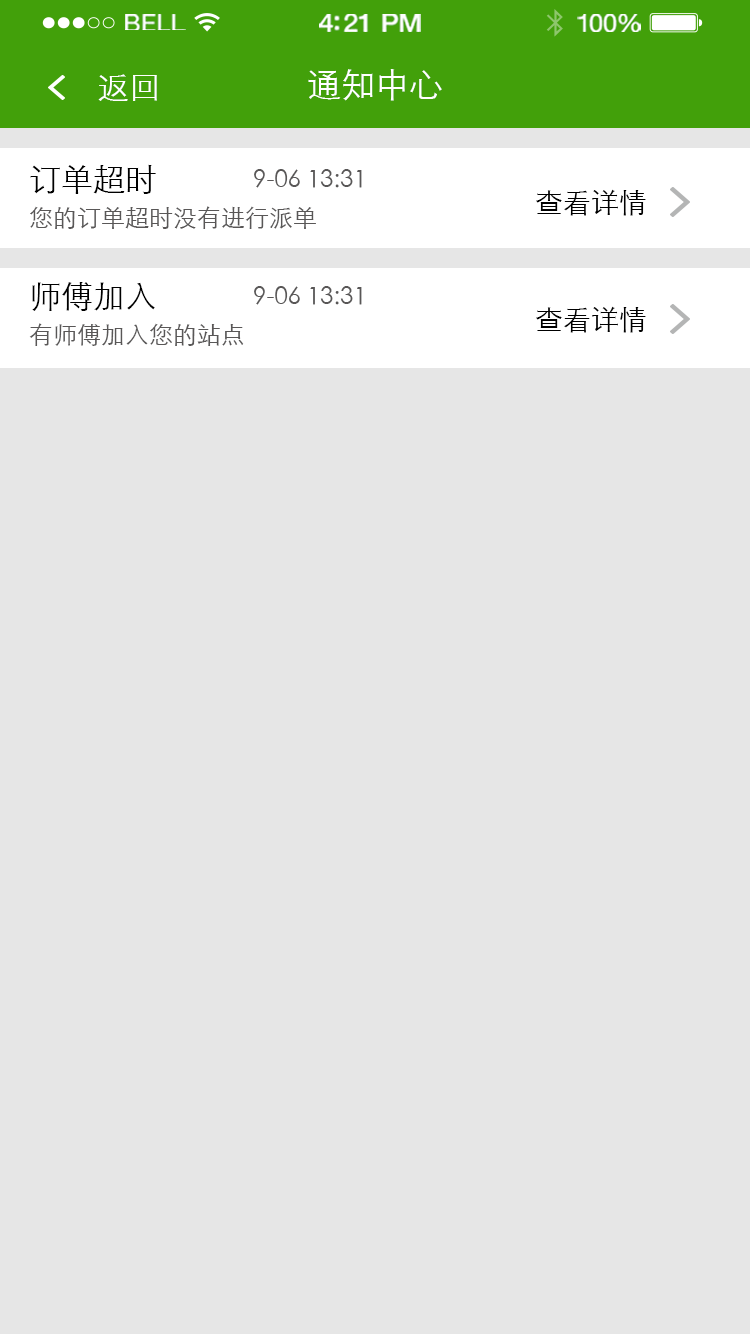
<style>
.page{position:relative;width:750px;height:1334px;background:#e6e6e6}
.page>*{position:absolute;margin:0}
.t1{font:23.3px "HelveticaNeue";letter-spacing:0.02em;color:#ffffff;scale:1.06 1}
.t2{font:25.3px "HelveticaNeue-Medium";letter-spacing:-0.02em;color:#ffffff;scale:1.06 1}
.t3{font:24.3px "HelveticaNeue";letter-spacing:-0.02em;color:#ffffff;scale:1.06 1}
.t4{font:32px "STXihei";color:#ffffff}
.t5{font:34px "STXihei";color:#ffffff}
.t6{font:32px "STXihei";color:#000000}
.t7{font:24px "STXihei";color:#595757}
.t8{font:28px "STXihei";color:#000000}
</style>
<div class="page">
<p class="t1" style="left:125px;top:14px;width:61px;height:16px">BELL</p>
<p class="t2" style="left:319px;top:14px;width:102px;height:18px">4:21 PM</p>
<p class="t3" style="left:577px;top:14px;width:64px;height:18px">100%</p>
<p class="t4" style="left:98px;top:74px;width:59px;height:27px">返回</p>
<p class="t5" style="left:308px;top:69px;width:134px;height:32px">通知中心</p>
<p class="t6" style="left:30px;top:164px;width:126px;height:30px">订单超时</p>
<p class="t7" style="left:254px;top:169px;width:108px;height:19px">9-06 13:31</p>
<p class="t8" style="left:536px;top:189px;width:110px;height:27px">查看详情</p>
<p class="t7" style="left:30px;top:206px;width:286px;height:23px">您的订单超时没有进行派单</p>
<p class="t6" style="left:32px;top:282px;width:123px;height:29px">师傅加入</p>
<p class="t7" style="left:254px;top:286px;width:108px;height:19px">9-06 13:31</p>
<p class="t8" style="left:536px;top:306px;width:110px;height:27px">查看详情</p>
<p class="t7" style="left:29px;top:323px;width:215px;height:23px">有师傅加入您的站点</p>
</div>
